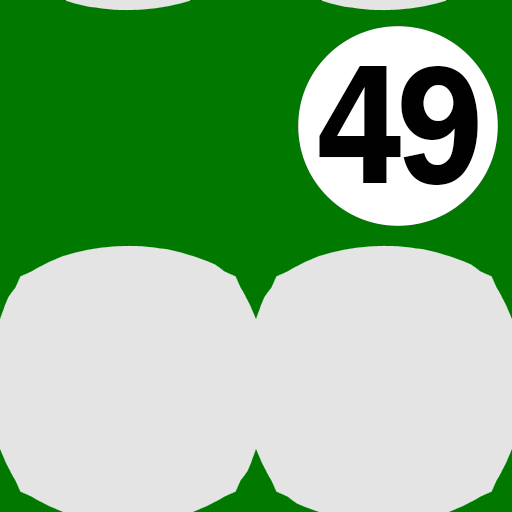
<style>
.page{position:relative;width:512px;height:512px;background:#e4e4e4}
.page>*{position:absolute;margin:0}
.t1{font:172.5px "FranklinGothic-Demi";letter-spacing:-0.05em;color:#010101;scale:0.87 1}
</style>
<div class="page">
<p class="t1" style="left:319px;top:66px;width:159px;height:119px">49</p>
</div>
